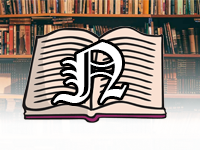
<style>
.page{position:relative;width:200px;height:150px}
.page>*{position:absolute;margin:0}
.t1{font:75px "OldEnglishTextMT";color:#ffffff}
</style>
<div class="page">
<p class="t1" style="left:53px;top:42px;width:74px;height:61px">N</p>
</div>
